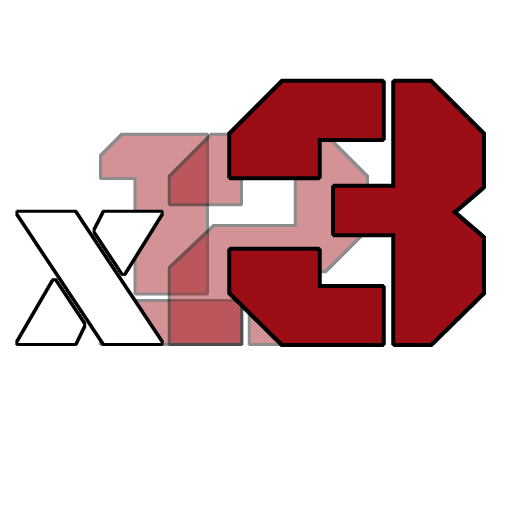
<style>
.page{position:relative;width:512px;height:512px;background:#ffffff}
.page>*{position:absolute;margin:0}
.t1{font:400.1px "BlackOpsOne-Regular";color:#9d0d15}
.t2{font:250px "BlackOpsOne-Regular";color:#ffffff}
</style>
<div class="page">
<p class="t1" style="left:231px;top:82px;width:251px;height:261px">3</p>
<p class="t2" style="left:18px;top:212px;width:143px;height:131px">x</p>
</div>
